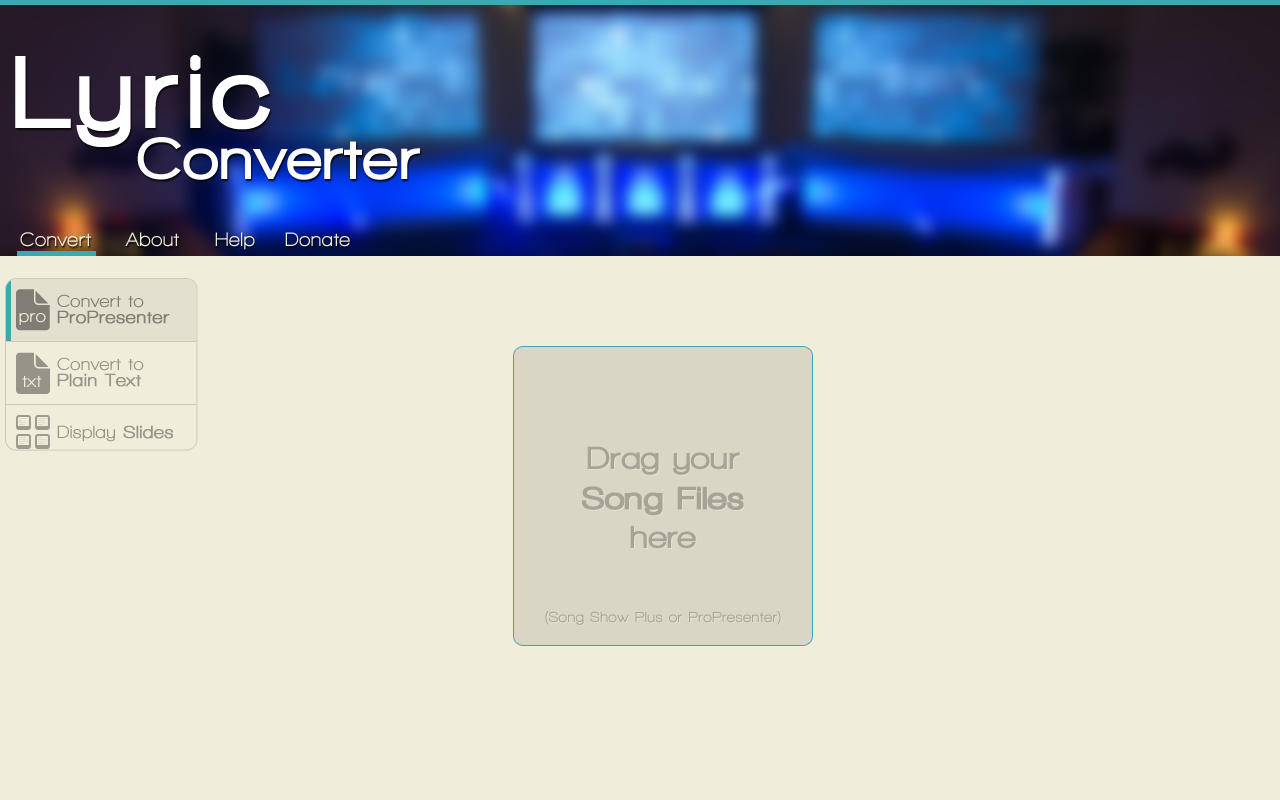
<style>
.page{position:relative;width:1280px;height:800px;background:#f0eddb}
.page>*{position:absolute;margin:0}
.t1{font:106.3px "WalkwayBlack";letter-spacing:0.1em;color:#ffffff}
.t2{font:61.2px "WalkwayBlack";letter-spacing:0.05em;color:#ffffff}
.t3{font:20px "WalkwayUltraBold";letter-spacing:0.03em;color:#f0eddb}
.t4{font:18px/16px "WalkwayUltraBold";letter-spacing:0.03em;color:#807e74;font-weight:bold}
.t5{font:18px/16px "WalkwayUltraBold";letter-spacing:0.03em;color:#807e74}
.t6{font:18px "WalkwayUltraBold";letter-spacing:0.03em;color:#f0eddb}
.t7{font:18px "WalkwayUltraBold";letter-spacing:0.03em;color:#807e74}
.t8{font:18px "WalkwayUltraBold";letter-spacing:0.03em;color:#807e74;font-weight:bold}
.t9{font:33px "WalkwayBlack";letter-spacing:0.03em;color:#a6a397;font-weight:bold}
.t10{font:33px "WalkwayBlack";letter-spacing:0.03em;color:#a6a397}
.t11{font:15px "WalkwayUltraBold";letter-spacing:0.03em;color:#a6a397}
</style>
<div class="page">
<p class="t1" style="left:15px;top:55px;width:255px;height:92px">Lyric</p>
<p class="t2" style="left:137px;top:137px;width:283px;height:43px">Converter</p>
<p class="t3" style="left:20px;top:232px;width:71px;height:15px">Convert</p>
<p class="t3" style="left:125px;top:232px;width:54px;height:15px">About</p>
<p class="t3" style="left:215px;top:232px;width:40px;height:18px">Help</p>
<p class="t3" style="left:285px;top:232px;width:65px;height:15px">Donate</p>
<p class="t4" style="left:57px;top:294px;width:113px;height:30px"><span class="t5">Convert to<br></span>ProPresenter</p>
<p class="t6" style="left:19px;top:313px;width:27px;height:12px">pro</p>
<p class="t5" style="left:57px;top:357px;width:87px;height:30px">Convert to<br><span class="t4">Plain Text</span></p>
<p class="t6" style="left:22px;top:376px;width:20px;height:11px">txt</p>
<p class="t7" style="left:57px;top:425px;width:116px;height:17px">Display <span class="t8">Slides</span></p>
<p class="t9" style="left:582px;top:446px;width:162px;height:103px;text-align:center"><span class="t10">Drag your<br></span>Song Files<br><span class="t10">here</span></p>
<p class="t11" style="left:545px;top:611px;width:236px;height:14px">(Song Show Plus or ProPresenter)</p>
</div>
